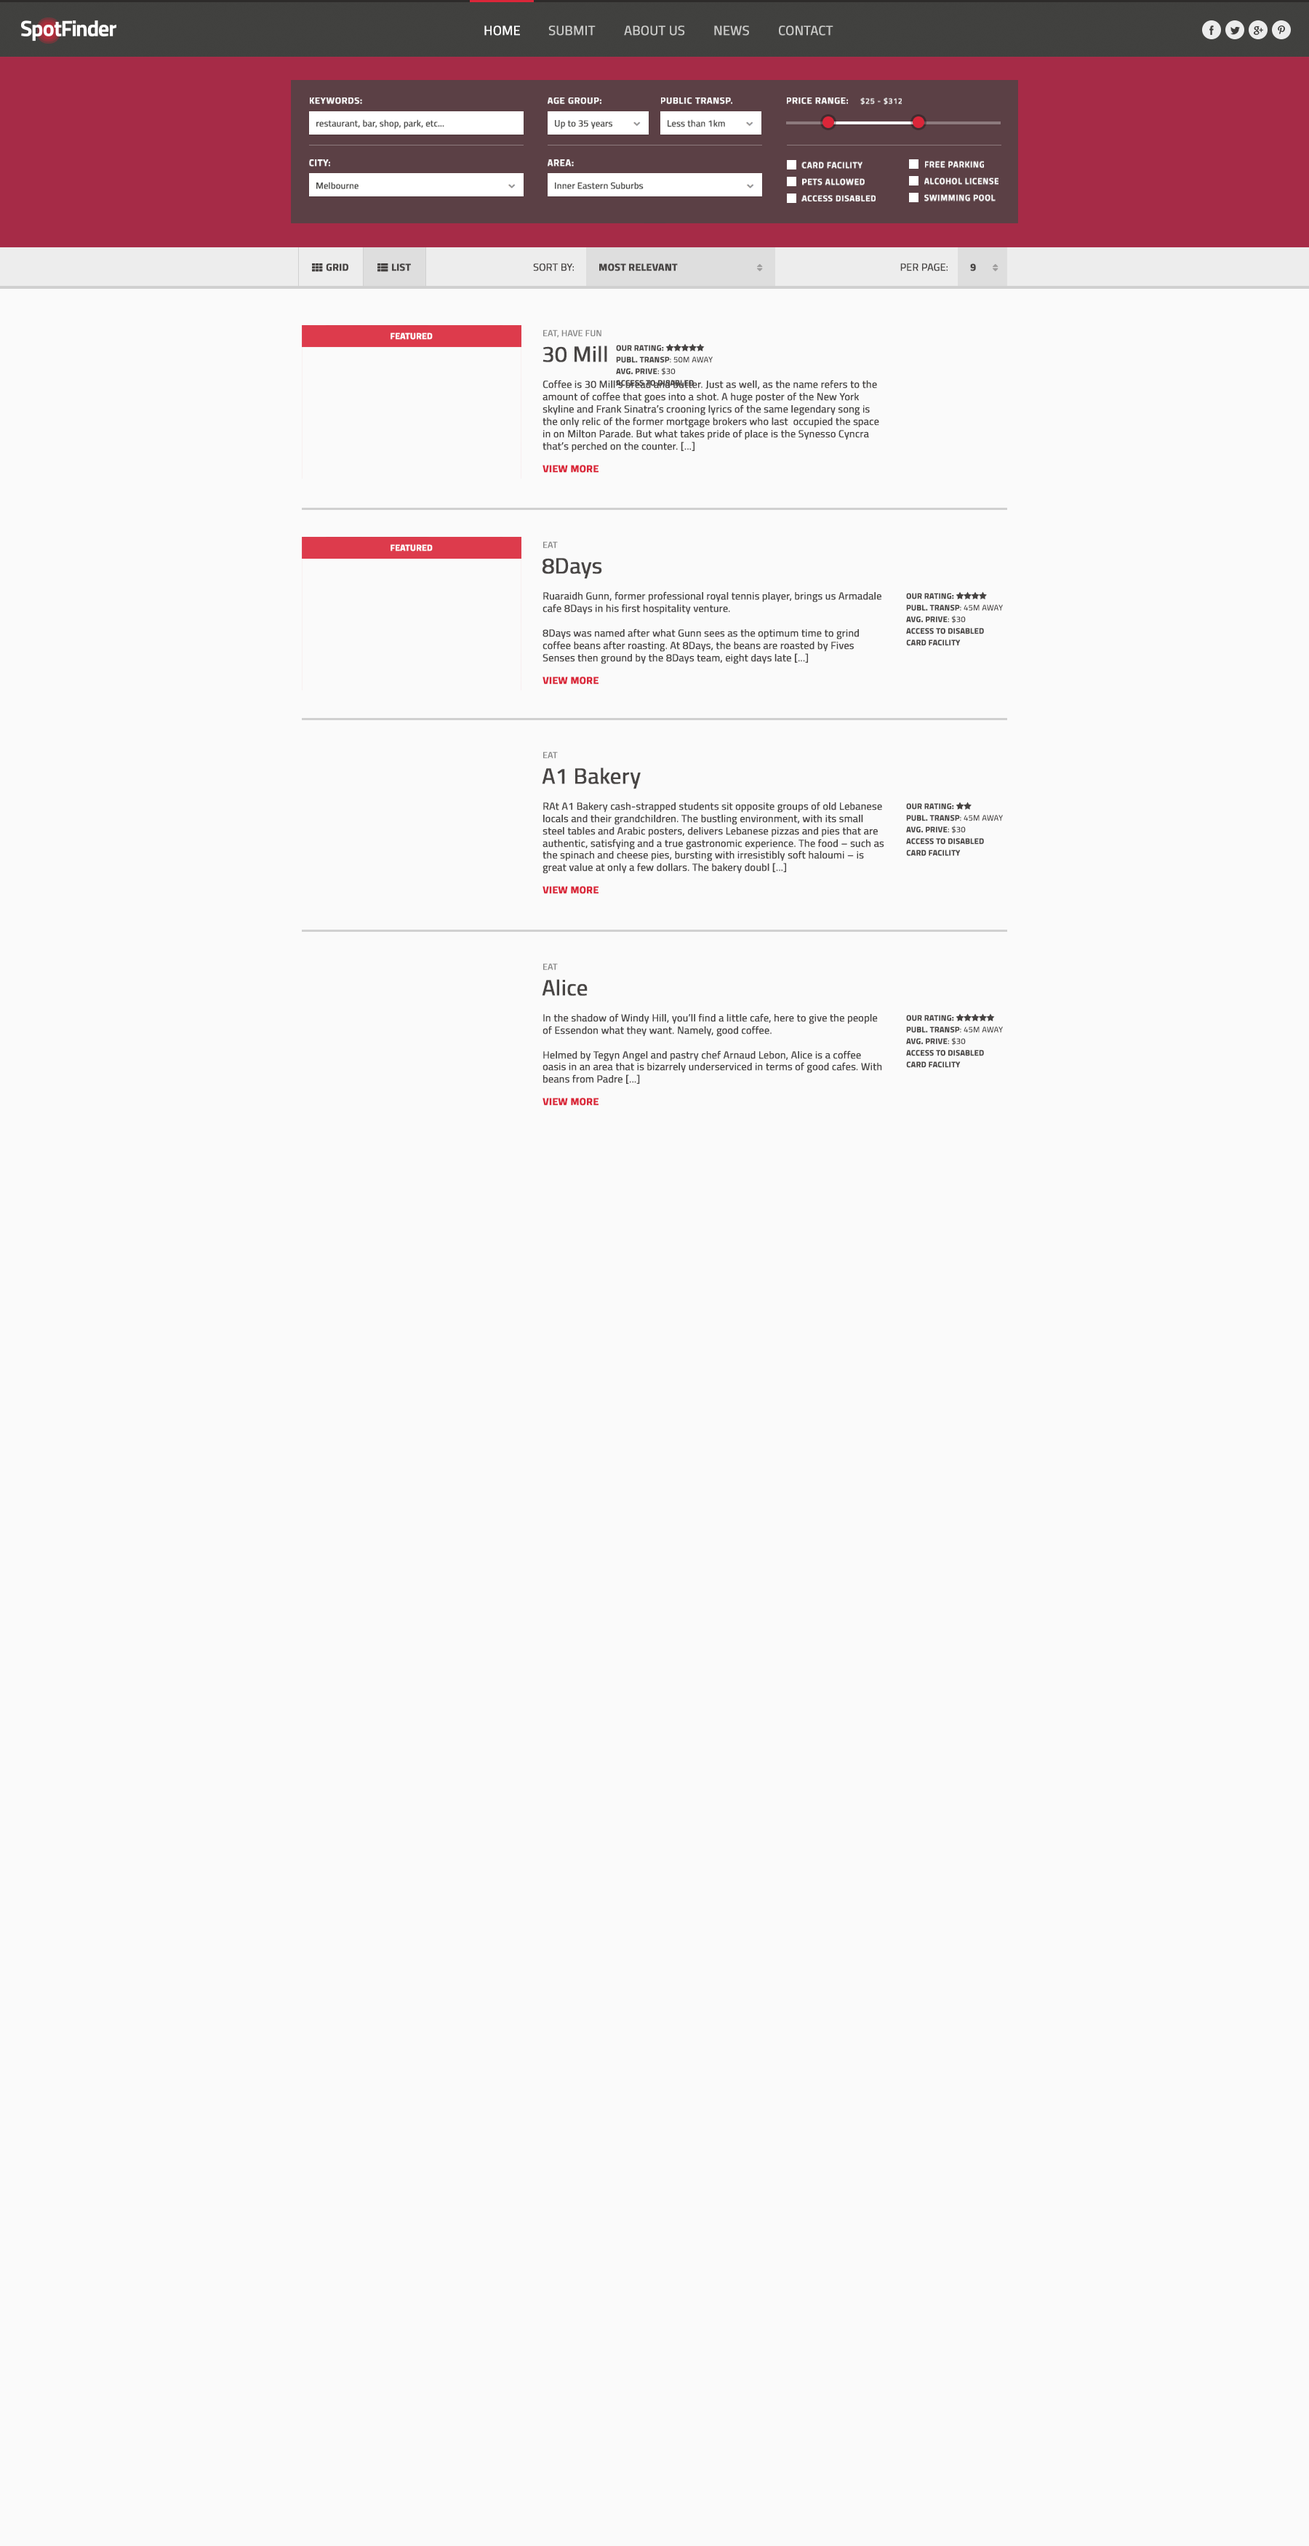
<style>
.page{position:relative;width:1309px;height:2546px;background:#fafafa}
.page>*{position:absolute;margin:0}
.t1{font:13.1px "TitilliumWeb-Regular";color:#ffffff;font-weight:bold}
.t2{font:13.1px "TitilliumWeb-Regular";color:#cacac8;font-weight:bold}
.t3{font:9px "TitilliumWeb-SemiBold";letter-spacing:0.05em;color:#ffffff;text-transform:uppercase;font-weight:bold}
.t4{font:7.6px "TitilliumWeb-Regular";letter-spacing:0.05em;color:#ffffff;text-transform:uppercase;font-weight:bold}
.t5{font:9px "TitilliumWeb-Regular";color:#40403e;font-weight:bold}
.t6{font:8.3px "TitilliumWeb-SemiBold";letter-spacing:0.05em;color:#ffffff;text-transform:uppercase;font-weight:bold}
.t7{font:10.2px "TitilliumWeb-Bold";color:#484544;text-transform:uppercase;font-weight:bold}
.t8{font:10.2px "TitilliumWeb-Regular";color:#484544;text-transform:uppercase;font-weight:bold}
.t9{font:8.7px "TitilliumWeb-Regular";color:#858585;text-transform:uppercase;font-weight:bold}
.t10{font:8.7px "TitilliumWeb-Bold";color:#ffffff;text-transform:uppercase;font-weight:bold}
.t11{font:21.8px "TitilliumWeb-Regular";color:#484544;font-weight:bold}
.t12{font:10.2px/12.4px "TitilliumWeb-Regular";color:#484544;font-weight:bold}
.t13{font:10.2px/22.6px "TitilliumWeb-Bold";color:#da2639;text-transform:uppercase;font-weight:bold}
.t14{font:10.2px "TitilliumWeb-Regular";color:#484544;font-weight:bold}
</style>
<div class="page">
<p class="t1" style="left:484px;top:25px;width:36px;height:11px">HOME</p>
<p class="t2" style="left:548px;top:25px;width:48px;height:11px">SUBMIT</p>
<p class="t2" style="left:624px;top:25px;width:61px;height:11px">ABOUT US</p>
<p class="t2" style="left:714px;top:25px;width:35px;height:11px">NEWS</p>
<p class="t2" style="left:779px;top:25px;width:55px;height:11px">CONTACT</p>
<p class="t3" style="left:310px;top:97px;width:52px;height:7px">Keywords:</p>
<p class="t3" style="left:548px;top:97px;width:54px;height:7px">Age Group:</p>
<p class="t3" style="left:661px;top:97px;width:72px;height:7px">Public Transp.</p>
<p class="t3" style="left:787px;top:97px;width:61px;height:7px">Price Range:</p>
<p class="t4" style="left:861px;top:97px;width:41px;height:8px">$25 - $312</p>
<p class="t5" style="left:316px;top:119px;width:128px;height:10px">restaurant, bar, shop, park, etc...</p>
<p class="t5" style="left:555px;top:120px;width:58px;height:9px">Up to 35 years</p>
<p class="t5" style="left:668px;top:119px;width:57px;height:8px">Less than 1km</p>
<p class="t3" style="left:309px;top:159px;width:21px;height:8px">City:</p>
<p class="t3" style="left:548px;top:159px;width:26px;height:8px">Area:</p>
<p class="t6" style="left:802px;top:161px;width:61px;height:8px">Card Facility</p>
<p class="t6" style="left:925px;top:161px;width:59px;height:7px">free Parking</p>
<p class="t5" style="left:316px;top:182px;width:43px;height:7px">Melbourne</p>
<p class="t5" style="left:555px;top:182px;width:89px;height:7px">Inner Eastern Suburbs</p>
<p class="t6" style="left:802px;top:178px;width:63px;height:7px">Pets Allowed</p>
<p class="t6" style="left:925px;top:177px;width:74px;height:8px">Alcohol License</p>
<p class="t6" style="left:802px;top:195px;width:74px;height:7px">Access Disabled</p>
<p class="t6" style="left:925px;top:194px;width:71px;height:8px">Swimming pool</p>
<p class="t7" style="left:326px;top:263px;width:22px;height:8px">GRID</p>
<p class="t7" style="left:392px;top:263px;width:19px;height:8px">List</p>
<p class="t8" style="left:533px;top:263px;width:41px;height:8px">SORT BY:</p>
<p class="t7" style="left:599px;top:263px;width:79px;height:8px">Most Relevant</p>
<p class="t8" style="left:901px;top:263px;width:47px;height:8px">per page:</p>
<p class="t7" style="left:970px;top:263px;width:6px;height:8px">9</p>
<p class="t9" style="left:543px;top:330px;width:59px;height:8px">eat, have fun</p>
<p class="t10" style="left:391px;top:332px;width:42px;height:8px">Featured</p>
<p class="t11" style="left:543px;top:346px;width:64px;height:16px">30 Mill</p>
<p class="t12" style="left:543px;top:380px;width:336px;height:93px">Coffee is 30 Mill’s bread and butter. Just as well, as the name refers to the amount of coffee that goes into a shot. A huge poster of the New York skyline and Frank Sinatra’s crooning lyrics of the same legendary song is the only relic of the former mortgage brokers who last  occupied the space in on Milton Parade. But what takes pride of place is the Synesso Cyncra that’s perched on the counter. [...]<br><span class="t13">View More</span></p>
<p class="t10" style="left:391px;top:544px;width:42px;height:7px">Featured</p>
<p class="t9" style="left:543px;top:541px;width:15px;height:7px">eat</p>
<p class="t11" style="left:543px;top:558px;width:59px;height:21px">8Days</p>
<p class="t12" style="left:543px;top:591px;width:339px;height:94px">Ruaraidh Gunn, former professional royal tennis player, brings us Armadale cafe 8Days in his first hospitality venture.<br><br>8Days was named after what Gunn sees as the optimum time to grind coffee beans after roasting. At 8Days, the beans are roasted by Fives Senses then ground by the 8Days team, eight days late [...]<br><span class="t13">View More</span></p>
<p class="t9" style="left:543px;top:751px;width:15px;height:8px">eat</p>
<p class="t11" style="left:542px;top:767px;width:99px;height:22px">A1 Bakery</p>
<p class="t14" style="left:543px;top:802px;width:342px;height:92px">RAt A1 Bakery cash-strapped students sit opposite groups of old Lebanese locals and their grandchildren. The bustling environment, with its small steel tables and Arabic posters, delivers Lebanese pizzas and pies that are authentic, satisfying and a true gastronomic experience. The food – such as the spinach and cheese pies, bursting with irresistibly soft haloumi – is great value at only a few dollars. The bakery doubl [...]<br><span class="t13">View More</span></p>
<p class="t9" style="left:543px;top:963px;width:15px;height:7px">eat</p>
<p class="t11" style="left:542px;top:979px;width:46px;height:17px">Alice</p>
<p class="t14" style="left:543px;top:1013px;width:339px;height:93px">In the shadow of Windy Hill, you’ll find a little cafe, here to give the people of Essendon what they want. Namely, good coffee.<br><br>Helmed by Tegyn Angel and pastry chef Arnaud Lebon, Alice is a coffee oasis in an area that is bizarrely underserviced in terms of good cafes. With beans from Padre [...]<br><span class="t13">View More</span></p>
</div>
